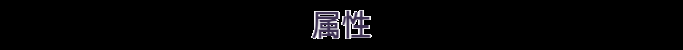
<style>
.page{position:relative;width:683px;height:50px;background:#000000}
.page>*{position:absolute;margin:0}
.t1{font:30px "WebPSD-18463539-0-Regular";color:#3f3254;font-weight:bold}
</style>
<div class="page">
<p class="t1" style="left:0px;top:0px;width:683px;height:50px">属性</p>
</div>
